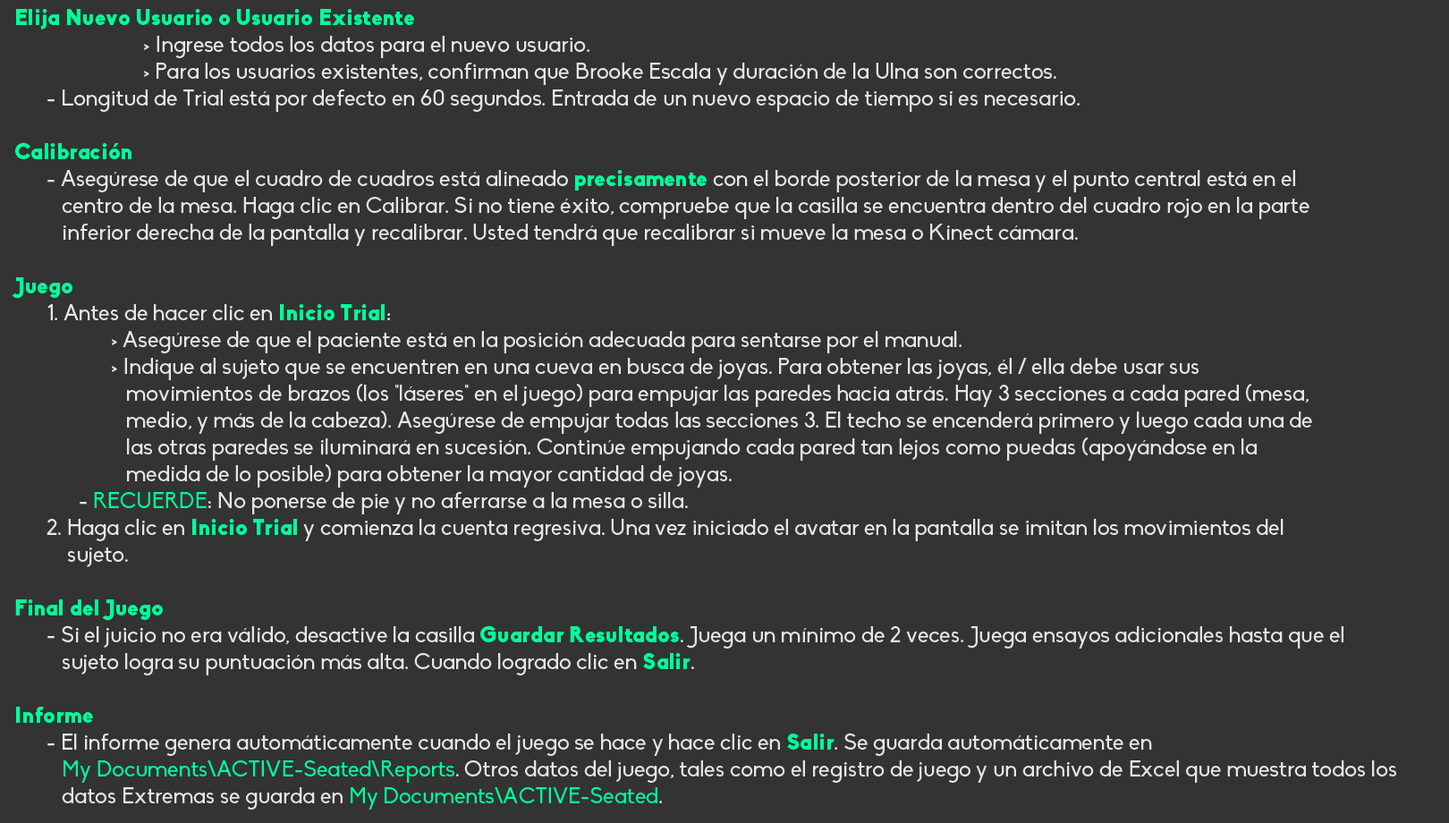
<style>
.page{position:relative;width:1449px;height:823px;background:#333333}
.page>*{position:absolute;margin:0}
.t1{font:22.4px "Biko";color:#e6e6e6}
.t2{font:22.4px "Biko-Black";color:#00fe9b}
.t3{font:22.4px "Biko";color:#00fe9b}
</style>
<div class="page">
<p class="t1" style="left:12px;top:9px;width:1384px;height:800px"><span class="t2">Elija Nuevo Usuario o Usuario Existente <br></span>    &gt; Ingrese todos los datos para el nuevo usuario. <br>    &gt; Para los usuarios existentes, confirman que Brooke Escala y duración de la Ulna son correctos. <br> - Longitud de Trial está por defecto en 60 segundos. Entrada de un nuevo espacio de tiempo si es necesario. <br><br><span class="t2">Calibración <br></span> - Asegúrese de que el cuadro de cuadros está alineado <span class="t2">precisamente</span> con el borde posterior de la mesa y el punto central está en el <br>    centro de la mesa. Haga clic en Calibrar. Si no tiene éxito, compruebe que la casilla se encuentra dentro del cuadro rojo en la parte <br>    inferior derecha de la pantalla y recalibrar. Usted tendrá que recalibrar si mueve la mesa o Kinect cámara. <br><br><span class="t2">Juego <br></span> 1. Antes de hacer clic en <span class="t2">Inicio Trial</span>: <br>   &gt; Asegúrese de que el paciente está en la posición adecuada para sentarse por el manual. <br>   &gt; Indique al sujeto que se encuentren en una cueva en busca de joyas. Para obtener las joyas, él / ella debe usar sus <br>      movimientos de brazos (los "láseres" en el juego) para empujar las paredes hacia atrás. Hay 3 secciones a cada pared (mesa, <br>      medio, y más de la cabeza). Asegúrese de empujar todas las secciones 3. El techo se encenderá primero y luego cada una de <br>      las otras paredes se iluminará en sucesión. Continúe empujando cada pared tan lejos como puedas (apoyándose en la <br>      medida de lo posible) para obtener la mayor cantidad de joyas. <br>  - <span class="t3">RECUERDE</span>: No ponerse de pie y no aferrarse a la mesa o silla. <br> 2. Haga clic en <span class="t2">Inicio Trial</span> y comienza la cuenta regresiva. Una vez iniciado el avatar en la pantalla se imitan los movimientos del <br>     sujeto. <br><br><span class="t2">Final del Juego</span> <br> - Si el juicio no era válido, desactive la casilla <span class="t2">Guardar Resultados</span>. Juega un mínimo de 2 veces. Juega ensayos adicionales hasta que el <br>    sujeto logra su puntuación más alta. Cuando logrado clic en <span class="t2">Salir</span>. <br><br><span class="t2">Informe</span> <br> - El informe genera automáticamente cuando el juego se hace y hace clic en <span class="t2">Salir</span>. Se guarda automáticamente en <br>    <span class="t3">My Documents\ACTIVE-Seated\Reports</span>. Otros datos del juego, tales como el registro de juego y un archivo de Excel que muestra todos los <br>    datos Extremas se guarda en <span class="t3">My Documents\ACTIVE-Seated</span>.</p>
</div>
